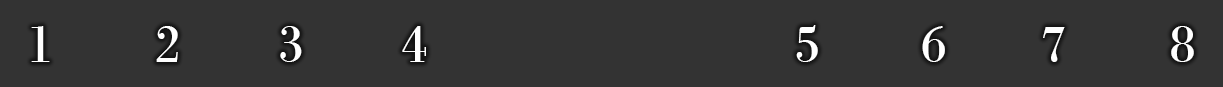
<style>
.page{position:relative;width:1223px;height:87px;background:#333333}
.page>*{position:absolute;margin:0}
.t1{font:55px "BodoniMT";color:#ffffff}
</style>
<div class="page">
<p class="t1" style="left:31px;top:26px;width:19px;height:36px">1</p>
<p class="t1" style="left:156px;top:26px;width:22px;height:36px">2</p>
<p class="t1" style="left:280px;top:26px;width:22px;height:36px">3</p>
<p class="t1" style="left:402px;top:26px;width:24px;height:36px">4</p>
<p class="t1" style="left:796px;top:25px;width:22px;height:37px">5</p>
<p class="t1" style="left:922px;top:26px;width:23px;height:36px">6</p>
<p class="t1" style="left:1043px;top:27px;width:22px;height:35px">7</p>
<p class="t1" style="left:1171px;top:26px;width:23px;height:36px">8</p>
</div>
